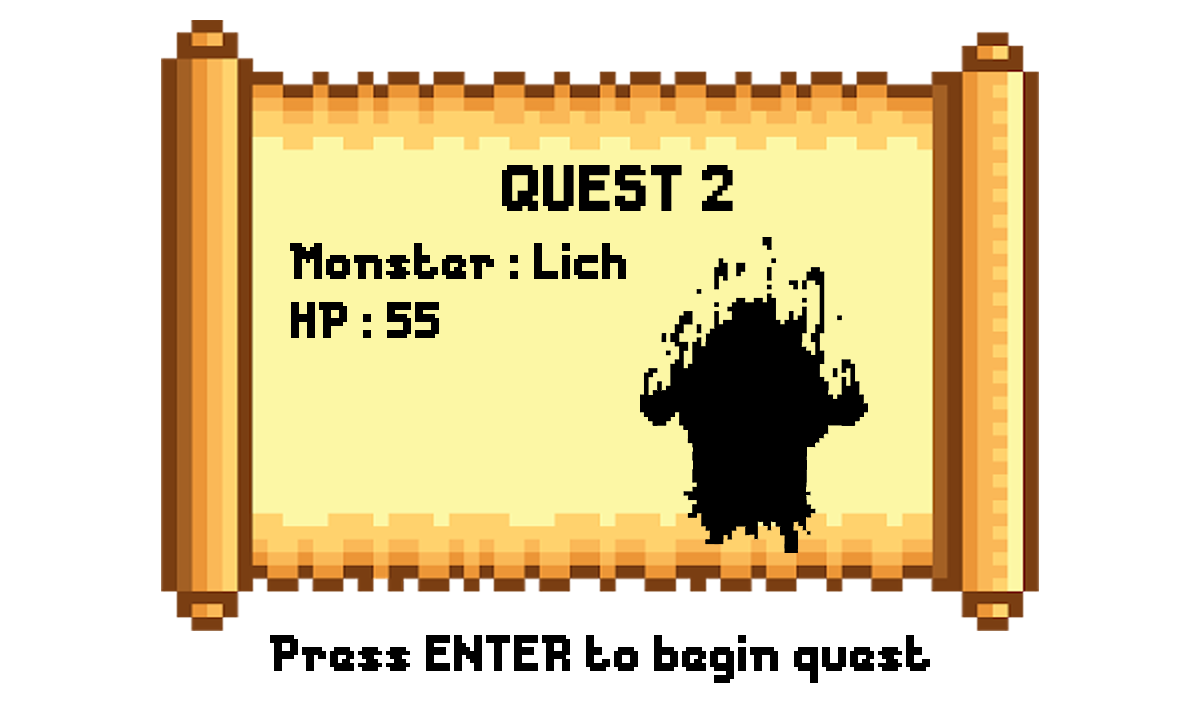
<style>
.page{position:relative;width:1200px;height:720px;background:#ffffff}
.page>*{position:absolute;margin:0}
.t1{font:61.3px "Messe-Duesseldorf";color:#000000}
.t2{font:48px "Messe-Duesseldorf";color:#000000}
</style>
<div class="page">
<p class="t1" style="left:502px;top:165px;width:231px;height:46px">QUEST 2</p>
<p class="t2" style="left:290px;top:243px;width:336px;height:36px">Monster : Lich</p>
<p class="t2" style="left:291px;top:302px;width:148px;height:36px">HP : 55</p>
<p class="t2" style="left:270px;top:635px;width:660px;height:48px">Press ENTER to begin quest</p>
</div>
